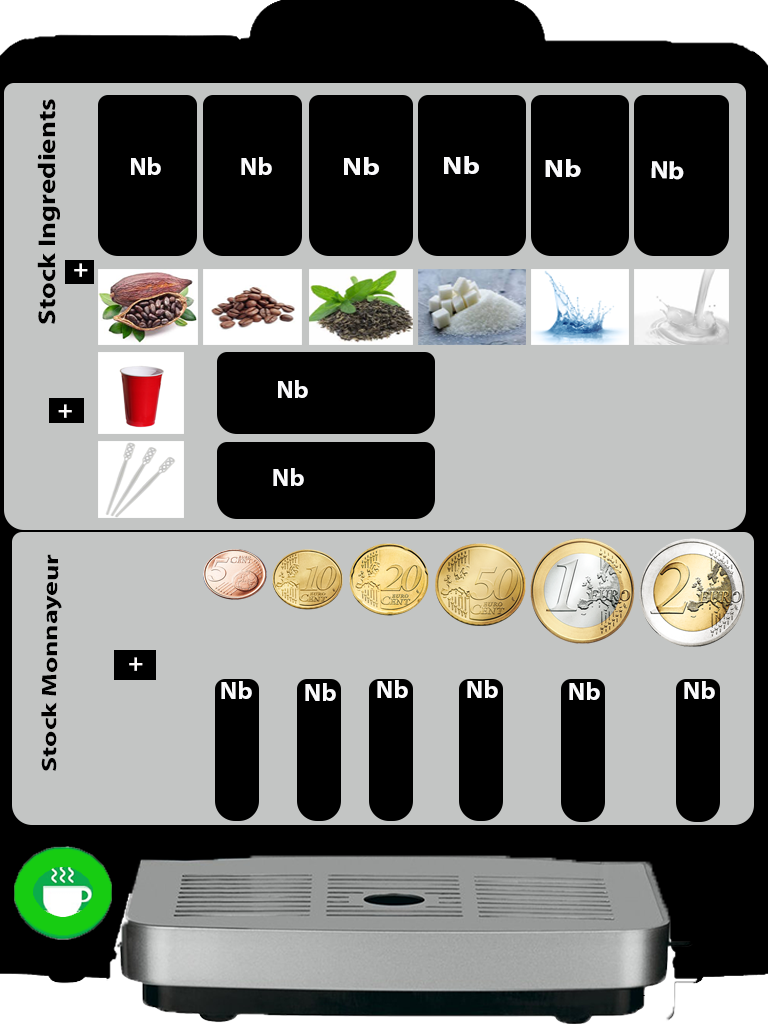
<style>
.page{position:relative;width:768px;height:1024px;background:#c3c5c4}
.page>*{position:absolute;margin:0}
.t1{font:24.3px "MyriadPro-Bold";color:#000000;scale:1.19 1}
.t2{font:25px "MyriadPro-Bold";color:#fafafc}
.t3{font:25px "MyriadPro-Bold";color:#fafafc;scale:1.17 1}
.t4{font:25px "MyriadPro-Bold";color:#fafafc;scale:1.19 1}
.t5{font:25px "MyriadPro-Bold";color:#fafafc;scale:1.08 1}
.t6{font:25px "MyriadPro-Bold";color:#fefdfd}
.t7{font:25px "MyriadPro-Bold";color:#fcfbfb}
.t8{font:20.9px "MyriadPro-Bold";color:#000000;scale:1.34 1}
.t9{font:25px "MyriadPro-Bold";color:#fffbfb}
.t10{font:25px "MyriadPro-Bold";color:#000000}
</style>
<div class="page">
<p class="t1" style="left:37px;top:99px;width:23px;height:225px;rotate:-90deg">Stock Ingredients</p>
<p class="t2" style="left:131px;top:157px;width:30px;height:18px">Nb</p>
<p class="t2" style="left:241px;top:157px;width:31px;height:18px">Nb</p>
<p class="t3" style="left:344px;top:157px;width:35px;height:18px">Nb</p>
<p class="t4" style="left:444px;top:156px;width:35px;height:18px">Nb</p>
<p class="t4" style="left:545px;top:159px;width:36px;height:18px">Nb</p>
<p class="t5" style="left:651px;top:161px;width:33px;height:19px;rotate:1deg">Nb</p>
<p class="t6" style="left:74px;top:263px;width:14px;height:14px">+</p>
<p class="t2" style="left:278px;top:380px;width:30px;height:18px">Nb</p>
<p class="t7" style="left:58px;top:404px;width:14px;height:14px">+</p>
<p class="t2" style="left:273px;top:468px;width:31px;height:18px">Nb</p>
<p class="t8" style="left:41px;top:554px;width:21px;height:217px;rotate:-89deg">Stock Monnayeur</p>
<p class="t9" style="left:129px;top:657px;width:14px;height:14px">+</p>
<p class="t2" style="left:221px;top:681px;width:31px;height:18px"><span class="t10"><br></span>Nb</p>
<p class="t2" style="left:305px;top:683px;width:31px;height:18px"><span class="t10"><br></span>Nb</p>
<p class="t2" style="left:377px;top:680px;width:31px;height:18px"><span class="t10"><br></span>Nb</p>
<p class="t2" style="left:467px;top:680px;width:31px;height:18px"><span class="t10"><br></span>Nb</p>
<p class="t2" style="left:569px;top:682px;width:31px;height:18px"><span class="t10"><br></span>Nb</p>
<p class="t2" style="left:684px;top:681px;width:31px;height:18px"><span class="t10"><br></span>Nb</p>
</div>
